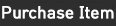
<style>
.page{position:relative;width:116px;height:26px;background:#2e2e2e}
.page>*{position:absolute;margin:0}
.t1{font:16.6px "HCRDotum-Bold";color:#ffffff}
</style>
<div class="page">
<p class="t1" style="left:2px;top:6px;width:112px;height:13px">Purchase Item</p>
</div>
